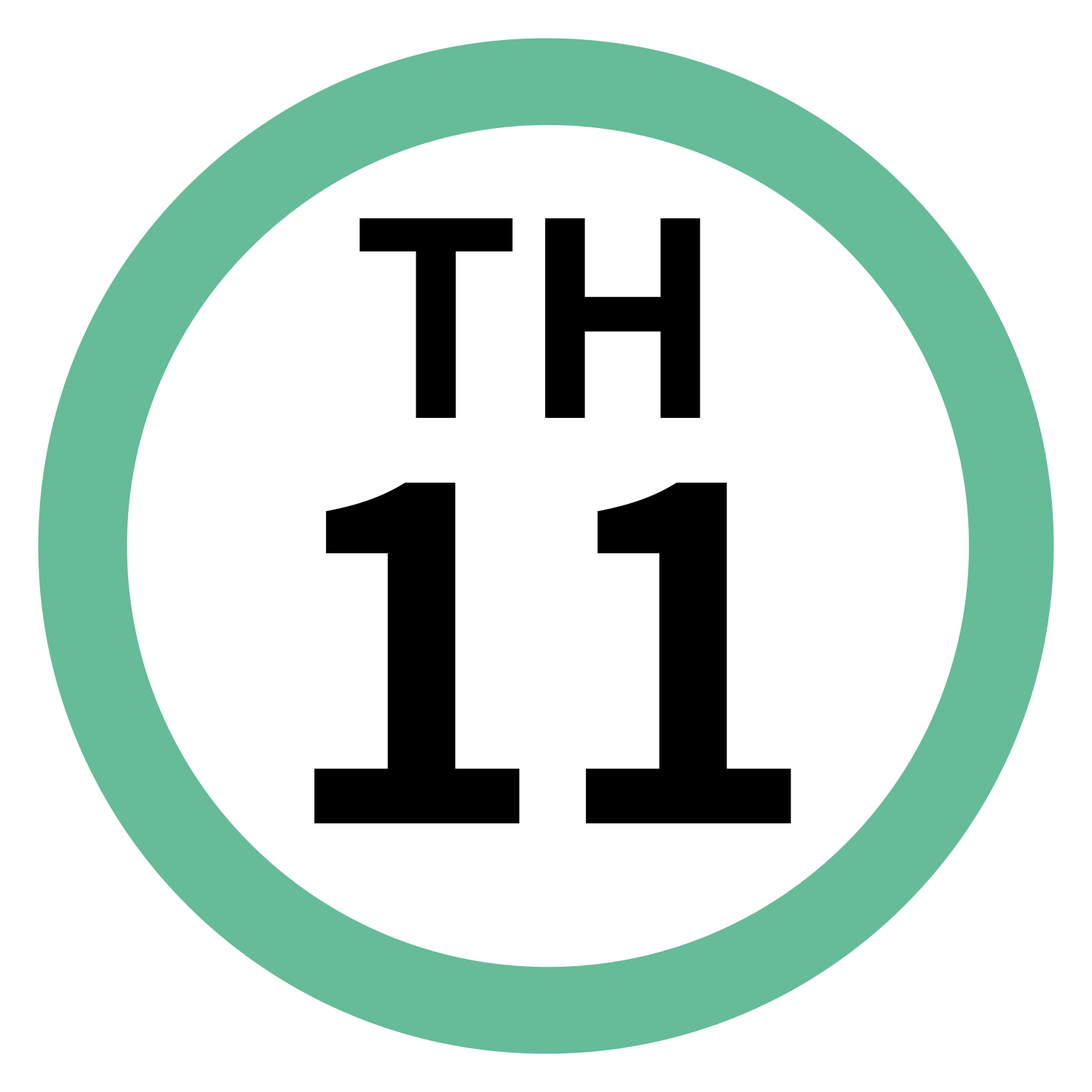
<style>
.page{position:relative;width:1092px;height:1092px;background:#ffffff}
.page>*{position:absolute;margin:0}
.t1{font:269.8px "NotoSansJP-Bold";color:#000000}
.t2{font:460.5px "NotoSansJP-Bold";color:#000000}
</style>
<div class="page">
<p class="t1" style="left:360px;top:218px;width:340px;height:200px">TH</p>
<p class="t2" style="left:314px;top:483px;width:477px;height:340px">11</p>
</div>
